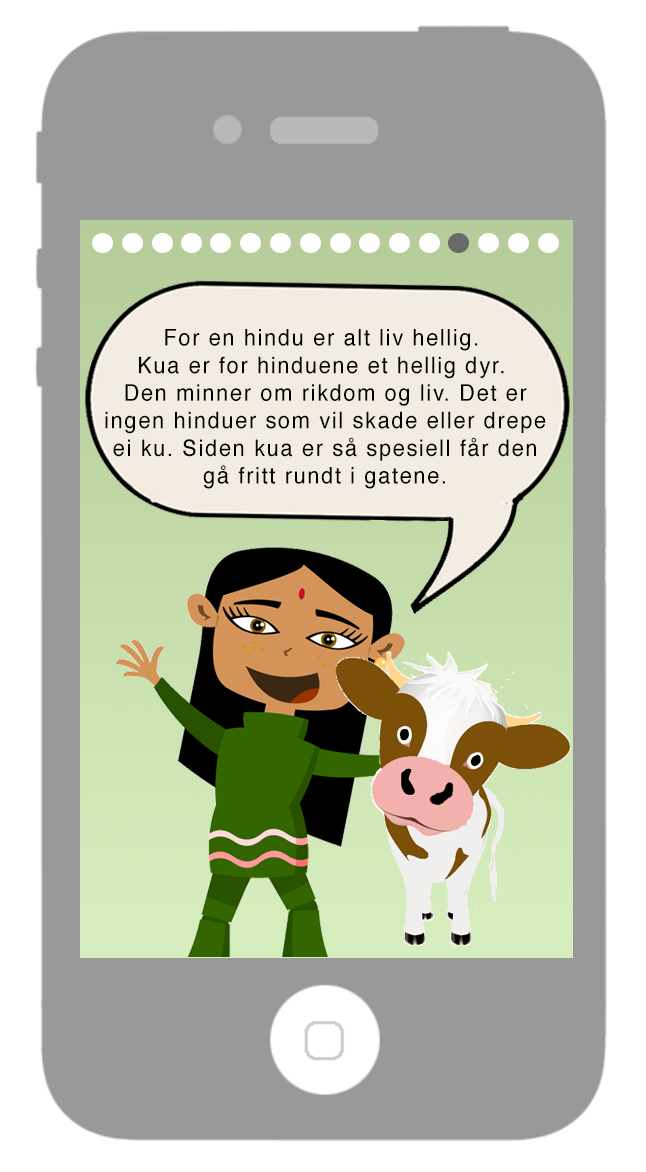
<style>
.page{position:relative;width:646px;height:1172px;background:#999999}
.page>*{position:absolute;margin:0}
.t1{font:11px "Helvetica";letter-spacing:0.075em;color:#010101;scale:0.95 1}
</style>
<div class="page">
<p class="t1" style="left:105px;top:329px;width:441px;height:160px;text-align:center">For en hindu er alt liv hellig. <br>Kua er for hinduene et hellig dyr. <br>Den minner om rikdom og liv. Det er<br>ingen hinduer som vil skade eller drepe<br>ei ku. Siden kua er så spesiell får den<br>gå fritt rundt i gatene.</p>
</div>
